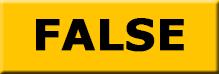
<style>
.page{position:relative;width:219px;height:74px;background:#ffc501}
.page>*{position:absolute;margin:0}
.t1{font:43px "Verdana-Bold";color:#000000;font-weight:bold}
</style>
<div class="page">
<p class="t1" style="left:36px;top:18px;width:148px;height:34px">FALSE</p>
</div>
